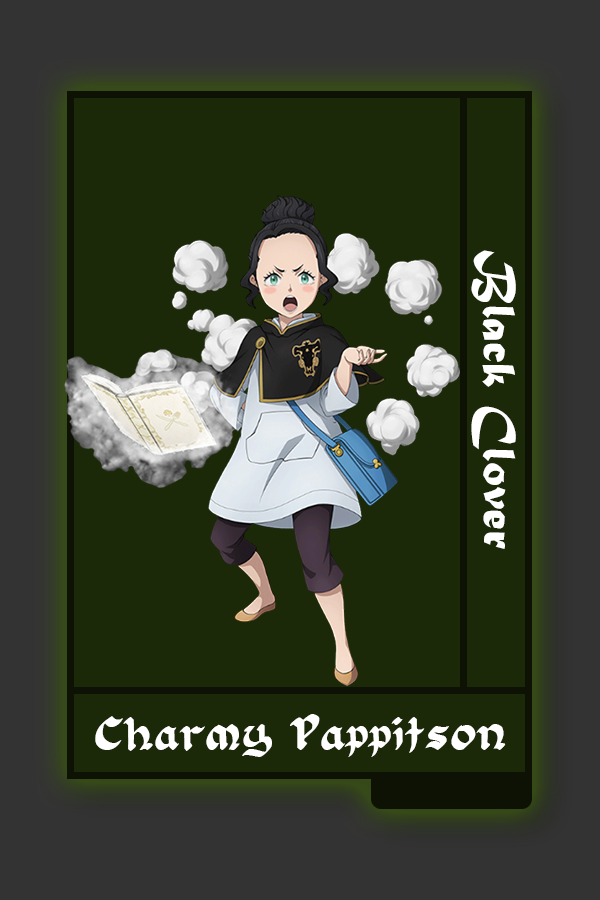
<style>
.page{position:relative;width:600px;height:900px;background:#1b2908}
.page>*{position:absolute;margin:0}
.t1{font:48.8px "MaturaMTScriptCapitals";color:#ffffff}
.t2{font:40px "FloranteatLaura";color:#ffffff}
</style>
<div class="page">
<p class="t1" style="left:471px;top:250px;width:45px;height:299px;rotate:90deg">Black Clover</p>
<p class="t2" style="left:95px;top:714px;width:411px;height:43px">Charmy Pappitson</p>
</div>
